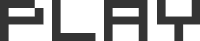
<style>
.page{position:relative;width:200px;height:41px;background:#ffffff}
.page>*{position:absolute;margin:0}
.t1{font:82.1px "VisitorTT1BRK";color:#343434;scale:1.06 1}
</style>
<div class="page">
<p class="t1" style="left:0px;top:0px;width:201px;height:41px">PLAY</p>
</div>
